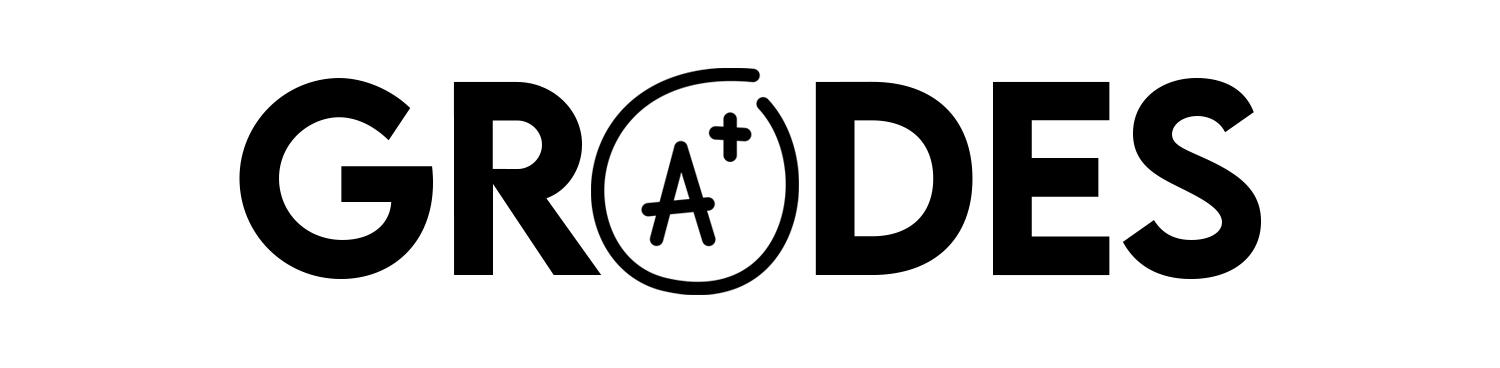
<style>
.page{position:relative;width:1500px;height:368px;background:#ffffff}
.page>*{position:absolute;margin:0}
.t1{font:245.4px "LEMONMILK-Medium";letter-spacing:-0.02em;color:#000000}
</style>
<div class="page">
<p class="t1" style="left:239px;top:78px;width:1022px;height:201px">gr   des</p>
</div>
